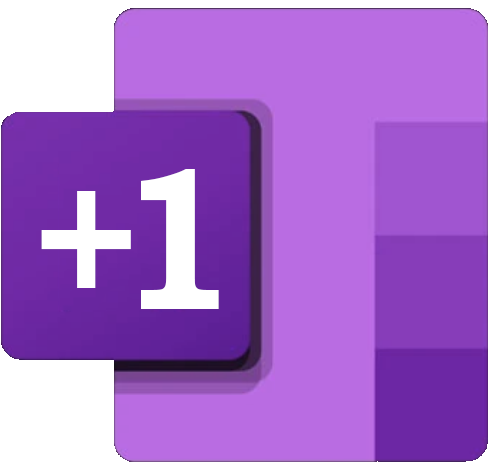
<style>
.page{position:relative;width:500px;height:470px;background:#b96ce2}
.page>*{position:absolute;margin:0}
.t1{font:201.6px "BookmanOldStyle-Bold";letter-spacing:-0.14em;color:#ffffff;scale:0.91 1}
</style>
<div class="page">
<p class="t1" style="left:41px;top:169px;width:178px;height:140px">+1</p>
</div>
